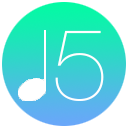
<style>
.page{position:relative;width:128px;height:128px;background:#ffffff}
.page>*{position:absolute;margin:0}
.t1{font:101.8px "HelveticaNeue-UltraLight";color:#ffffff}
</style>
<div class="page">
<p class="t1" style="left:55px;top:30px;width:49px;height:71px">5</p>
</div>
